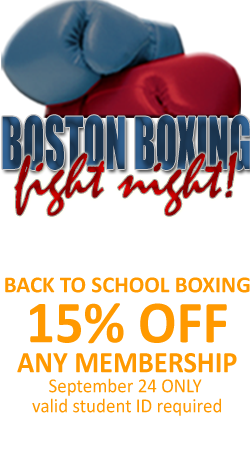
<style>
.page{position:relative;width:250px;height:450px;background:#ffffff}
.page>*{position:absolute;margin:0}
.t1{font:66.4px "Impact";scale:0.6 1}
.t2{font:63.5px "Mistral"}
.t3{font:20px/20px "Calibri";color:#ff9900;scale:0.95 1}
.t4{font:40px/40px "Calibri-Bold";color:#ffffff;scale:0.97 1}
.t5{font:23px/20px "Calibri-Bold";color:#ff9900;text-transform:uppercase}
.t6{font:60px/50px "Calibri-Bold";color:#ff9900;scale:0.95 1}
.t7{font:30px/30px "Calibri-Bold";color:#ff9900;scale:0.95 1}
</style>
<div class="page">
<p class="t1" style="left:2px;top:115px;width:248px;height:55px">BOSTON BOXING</p>
<p class="t2" style="left:14px;top:152px;width:223px;height:64px">fight night!</p>
<p class="t3" style="left:5px;top:231px;width:245px;height:185px;text-align:center"><span class="t4">SEPTEMBER 24<br><br></span><span class="t5">Back to School Boxing<br></span><span class="t6">15% OFF<br></span><span class="t7">ANY MEMBERSHIP<br></span>September 24 ONLY <br>valid student ID required</p>
</div>
